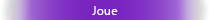
<style>
.page{position:relative;width:209px;height:20px}
.page>*{position:absolute;margin:0}
.t1{font:12.5px "LaoUI";color:#fefefe}
</style>
<div class="page">
<p class="t1" style="left:92px;top:6px;width:26px;height:9px">Joue</p>
</div>
